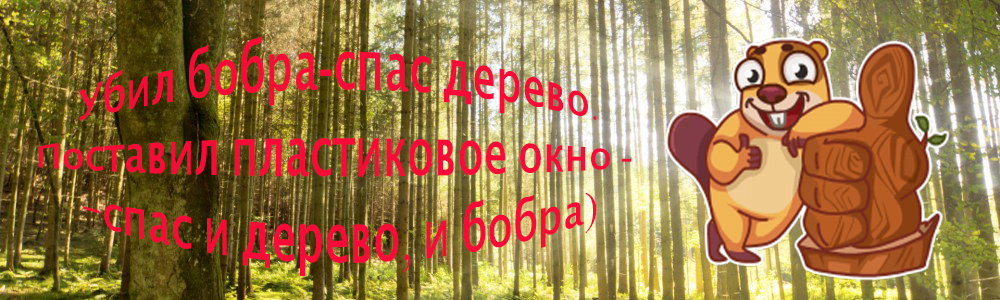
<style>
.page{position:relative;width:1000px;height:300px}
.page>*{position:absolute;margin:0}
.t1{font:27.4px "LucidaSansUnicode";color:#f80b37;scale:1.51 1}
.t2{font:27.4px "MongolianBaiti";color:#f80b37;scale:1.51 1}
</style>
<div class="page">
<p class="t1" style="left:38px;top:36px;width:593px;height:241px;text-align:center">Убил бобра<span class="t2">-</span>спас дерево<span class="t2">.<br></span>Поставил пластиковое окно<span class="t2"> - <br></span>-спас и дерево<span class="t2">, </span>и бобра<span class="t2">)</span></p>
</div>
